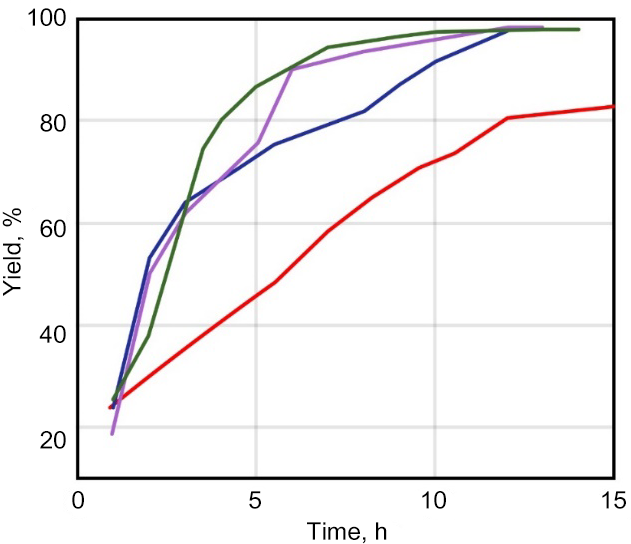
<style>
.page{position:relative;width:631px;height:544px;background:#ffffff}
.page>*{position:absolute;margin:0}
.t1{font:24.4px "ArialUnicodeMS";color:#000000}
</style>
<div class="page">
<p class="t1" style="left:28px;top:8px;width:38px;height:441px;text-align:right">100<br>80<br>60<br>40<br>20</p>
<p class="t1" style="left:2px;top:208px;width:22px;height:88px;rotate:-90deg">Yield, %</p>
<p class="t1" style="left:72px;top:491px;width:12px;height:18px">0</p>
<p class="t1" style="left:249px;top:491px;width:12px;height:18px">5</p>
<p class="t1" style="left:422px;top:491px;width:24px;height:18px">10</p>
<p class="t1" style="left:602px;top:491px;width:24px;height:18px">15</p>
<p class="t1" style="left:307px;top:522px;width:80px;height:22px">Time, h</p>
</div>
